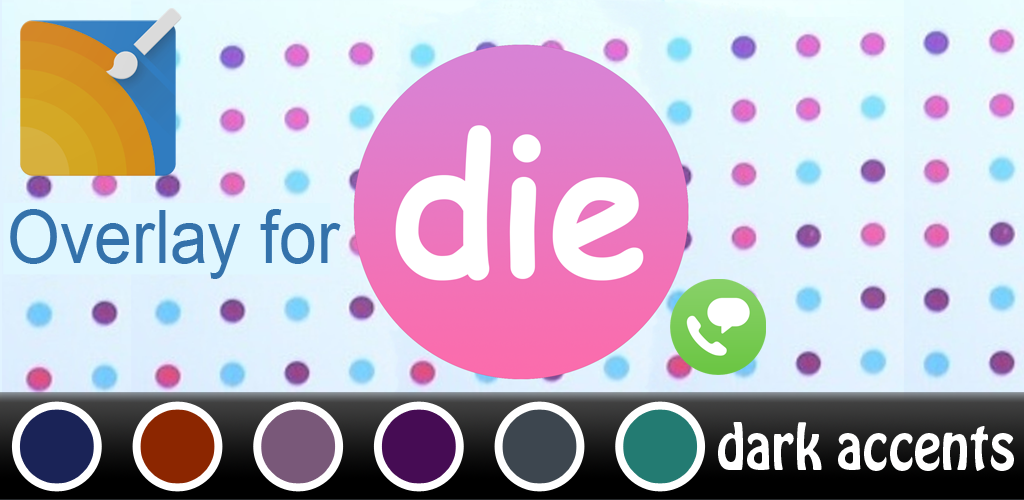
<style>
.page{position:relative;width:1024px;height:500px}
.page>*{position:absolute;margin:0}
.t1{font:72.8px "ArialMT";color:#3472ab;scale:0.93 1}
.t2{font:55.6px "HoboStd";color:#ffffff;scale:0.93 1}
</style>
<div class="page">
<p class="t1" style="left:10px;top:209px;width:331px;height:70px">Overlay for</p>
<p class="t2" style="left:718px;top:422px;width:296px;height:49px">dark accents</p>
</div>
